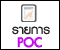
<style>
.page{position:relative;width:60px;height:50px;background:#ffffff}
.page>*{position:absolute;margin:0}
.t1{font:18px "PSLxKittithada-Bold";color:#202020}
.t2{font:18px "PSLxKittithada-Bold";color:#c40bf2;font-weight:bold}
</style>
<div class="page">
<p class="t1" style="left:12px;top:26px;width:38px;height:9px">รายการ</p>
<p class="t2" style="left:17px;top:37px;width:25px;height:11px">POC</p>
</div>
